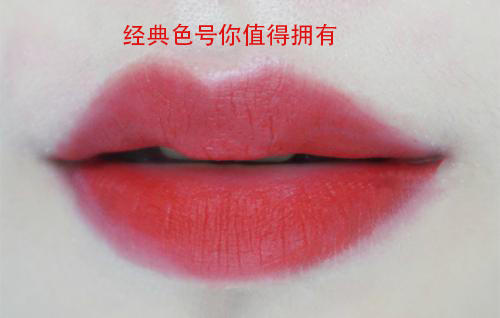
<style>
.page{position:relative;width:500px;height:318px}
.page>*{position:absolute;margin:0}
.t1{font:24px "AdobeHeitiStd-Regular";color:#df1010}
</style>
<div class="page">
<p class="t1" style="left:123px;top:23px;width:214px;height:23px">经典色号你值得拥有</p>
</div>
